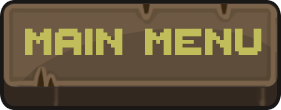
<style>
.page{position:relative;width:281px;height:110px}
.page>*{position:absolute;margin:0}
.t1{font:60px "ThaleahFat";color:#c0bd5a}
</style>
<div class="page">
<p class="t1" style="left:25px;top:28px;width:237px;height:27px">maIN MENU</p>
</div>
